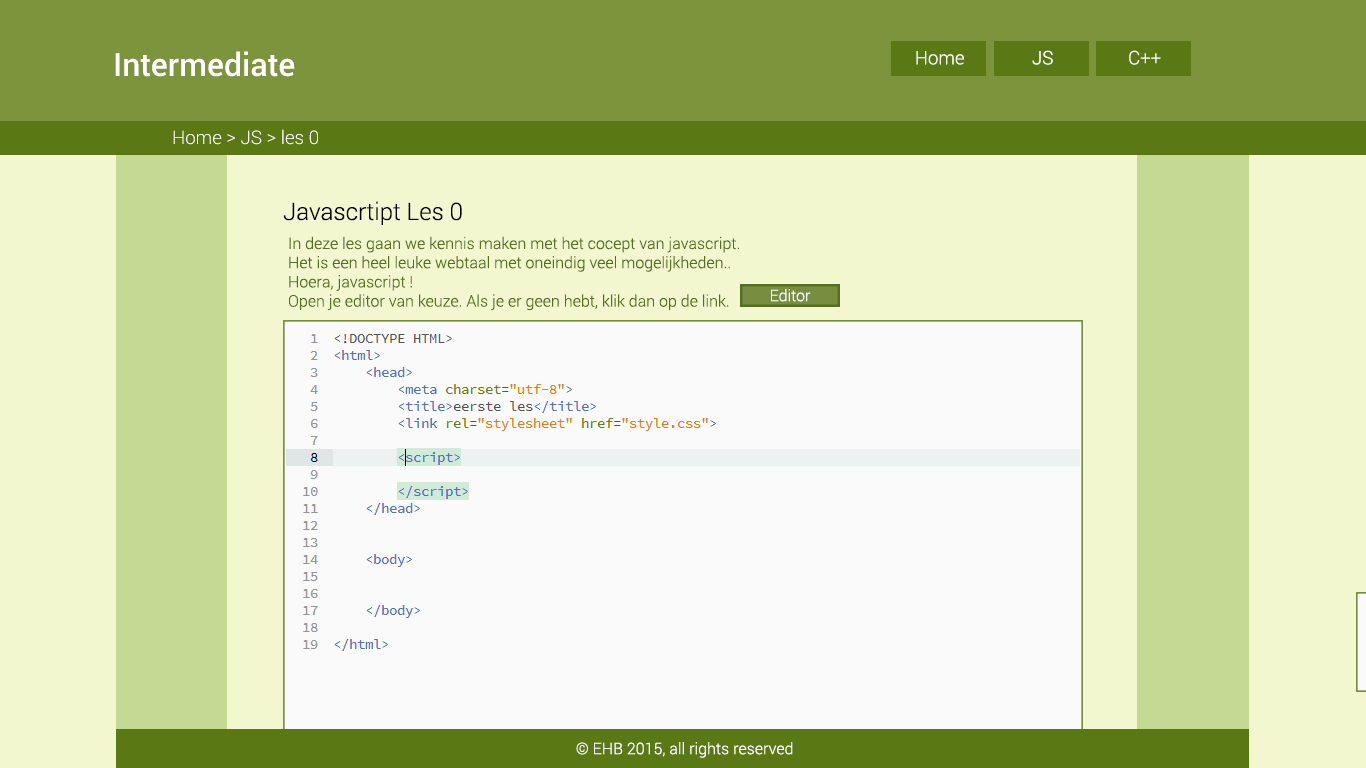
<style>
.page{position:relative;width:1366px;height:768px;background:#f2f7d0}
.page>*{position:absolute;margin:0}
.t1{font:32px "Roboto-Medium";color:#ffffff}
.t2{font:18.7px "Roboto-Light";color:#ffffff}
.t3{font:24px "Roboto-Light";color:#000000}
.t4{font:16px "Roboto-Light";color:#5a7814}
.t5{font:16px "Roboto-Light";color:#ffffff}
</style>
<div class="page">
<p class="t1" style="left:115px;top:51px;width:180px;height:26px">Intermediate</p>
<p class="t2" style="left:916px;top:51px;width:48px;height:14px">Home</p>
<p class="t2" style="left:1032px;top:50px;width:21px;height:15px">JS</p>
<p class="t2" style="left:1129px;top:50px;width:32px;height:15px">C++</p>
<p class="t2" style="left:173px;top:129px;width:145px;height:16px">Home &gt; JS &gt; les 0</p>
<p class="t3" style="left:283px;top:201px;width:179px;height:24px">Javascrtipt Les 0</p>
<p class="t4" style="left:289px;top:236px;width:450px;height:75px">In deze les gaan we kennis maken met het cocept van javascript. <br>Het is een heel leuke webtaal met oneindig veel mogelijkheden..<br>Hoera, javascript ! <br>Open je editor van keuze. Als je er geen hebt, klik dan op de link.</p>
<p class="t5" style="left:771px;top:289px;width:40px;height:13px">Editor</p>
<p class="t5" style="left:576px;top:742px;width:217px;height:16px">© EHB 2015, all rights reserved</p>
</div>
